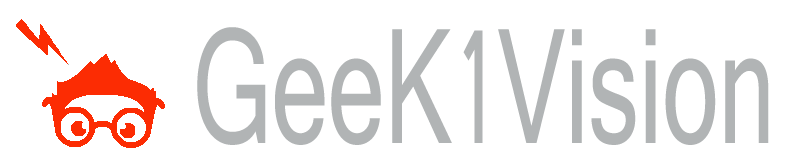
<style>
.page{position:relative;width:800px;height:168px;background:#ffffff}
.page>*{position:absolute;margin:0}
.t1{font:176.9px "Vrinda";color:#b1b4b5;scale:0.64 1}
</style>
<div class="page">
<p class="t1" style="left:197px;top:27px;width:572px;height:118px">GeeK1Vision</p>
</div>
